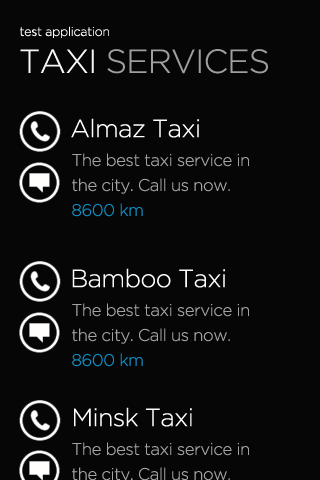
<style>
.page{position:relative;width:320px;height:480px;background:#070606}
.page>*{position:absolute;margin:0}
.t1{font:12.5px "Gotham-Light";letter-spacing:-0.025em;color:#fffefc}
.t2{font:33.3px "Gotham-Light";letter-spacing:-0.025em;color:#a09f9e}
.t3{font:33.3px "Gotham-Light";letter-spacing:-0.025em;color:#f9f7f5}
.t4{font:25px "Gotham-Light";letter-spacing:-0.025em;color:#fffefc}
.t5{font:16.7px/25px "Gotham-Light";letter-spacing:-0.025em;color:#a4a3a2}
.t6{font:16.7px/25px "Gotham-Light";letter-spacing:-0.025em;color:#118cc0}
</style>
<div class="page">
<p class="t1" style="left:20px;top:26px;width:89px;height:12px">test application</p>
<p class="t2" style="left:20px;top:49px;width:248px;height:25px"><span class="t3">TAXI </span>SERVICES</p>
<p class="t4" style="left:71px;top:118px;width:128px;height:20px">Almaz Taxi</p>
<p class="t5" style="left:72px;top:153px;width:177px;height:64px">The best taxi service in <br>the city. Call us now.<br><span class="t6">8600 km</span></p>
<p class="t4" style="left:72px;top:268px;width:153px;height:20px">Bamboo Taxi</p>
<p class="t5" style="left:72px;top:303px;width:177px;height:64px">The best taxi service in <br>the city. Call us now.<br><span class="t6">8600 km</span></p>
<p class="t4" style="left:74px;top:407px;width:118px;height:20px">Minsk Taxi</p>
</div>
